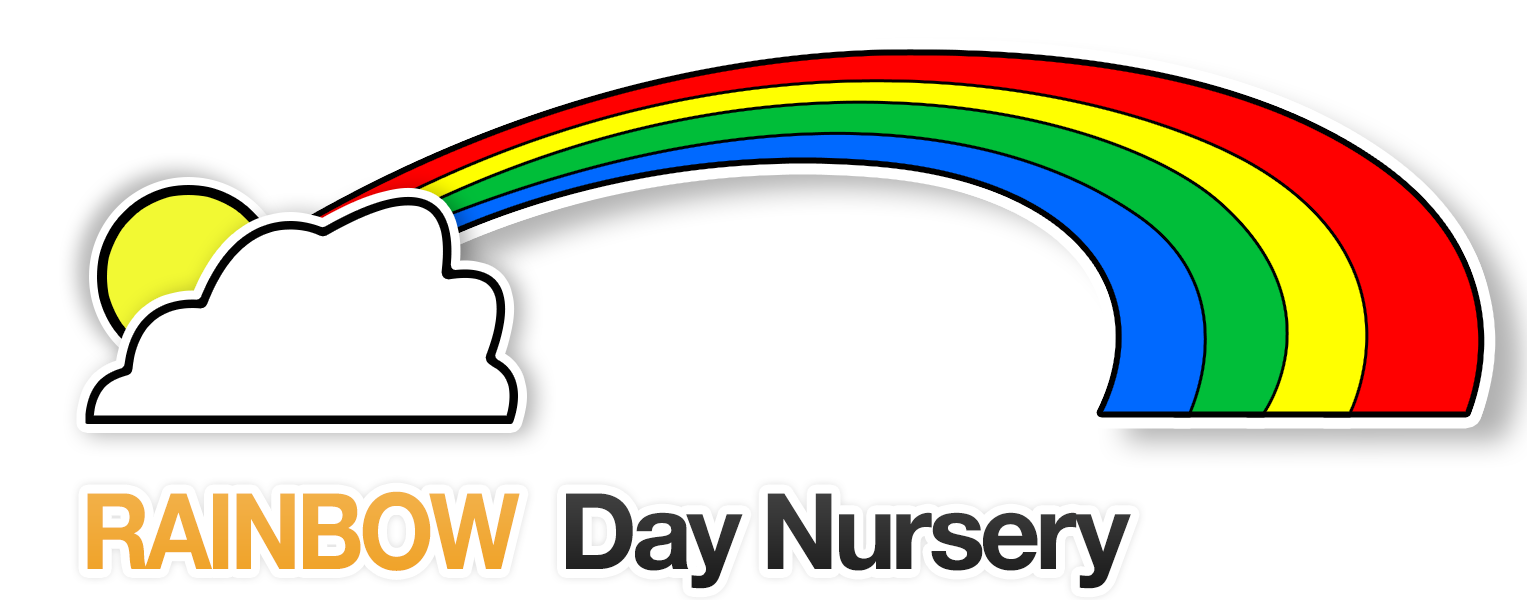
<style>
.page{position:relative;width:1527px;height:600px;background:#ffffff}
.page>*{position:absolute;margin:0}
.t1{font:181px "HelveticaNeueCE-Bold";letter-spacing:-0.05em}
.t2{font:181px "HelveticaNeueCE-Bold";letter-spacing:-0.05em;scale:0.91 1}
</style>
<div class="page">
<p class="t1" style="left:87px;top:491px;width:1044px;height:98px"><span class="t2">RAINBOW  </span>Day Nursery</p>
</div>
